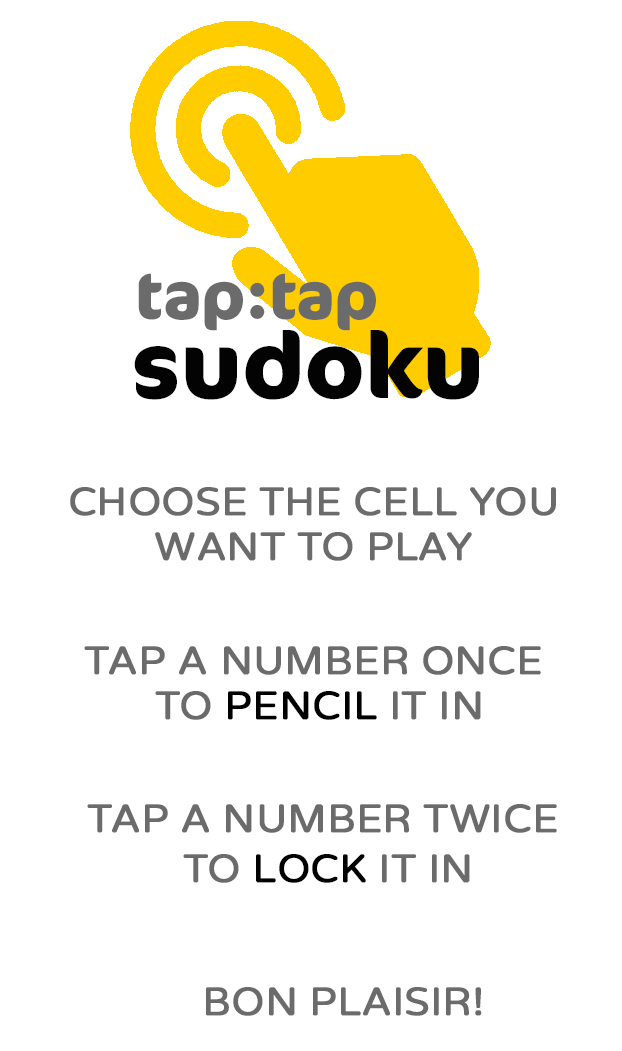
<style>
.page{position:relative;width:622px;height:1051px;background:#ffffff}
.page>*{position:absolute;margin:0}
.t1{font:66px "Cocon-Bold";color:#6b6b6b}
.t2{font:92px "Cocon-Bold";color:#030303}
.t3{font:40px/45px "VarelaRound-Regular";color:#6b6b6b;text-transform:uppercase;font-weight:bold}
.t4{font:40px/45px "VarelaRound-Regular";color:#000000;text-transform:uppercase;font-weight:bold}
.t5{font:40px/50px "VarelaRound-Regular";color:#6b6b6b;text-transform:uppercase;font-weight:bold}
.t6{font:40px/50px "VarelaRound-Regular";color:#000000;text-transform:uppercase;font-weight:bold}
.t7{font:40px "VarelaRound-Regular";color:#6b6b6b;text-transform:uppercase;font-weight:bold}
</style>
<div class="page">
<p class="t1" style="left:138px;top:273px;width:238px;height:58px">tap:tap</p>
<p class="t2" style="left:134px;top:330px;width:345px;height:70px">sudoku</p>
<p class="t3" style="left:70px;top:487px;width:486px;height:74px;text-align:center">choose the cell you<br>want to play</p>
<p class="t3" style="left:84px;top:646px;width:457px;height:74px;text-align:center">tap a number once<br> to <span class="t4">pencil </span>it in</p>
<p class="t5" style="left:87px;top:804px;width:470px;height:79px;text-align:center">tap a number twice<br> to <span class="t6">lock </span>it in</p>
<p class="t7" style="left:206px;top:987px;width:276px;height:29px">bon plaisir!</p>
</div>
